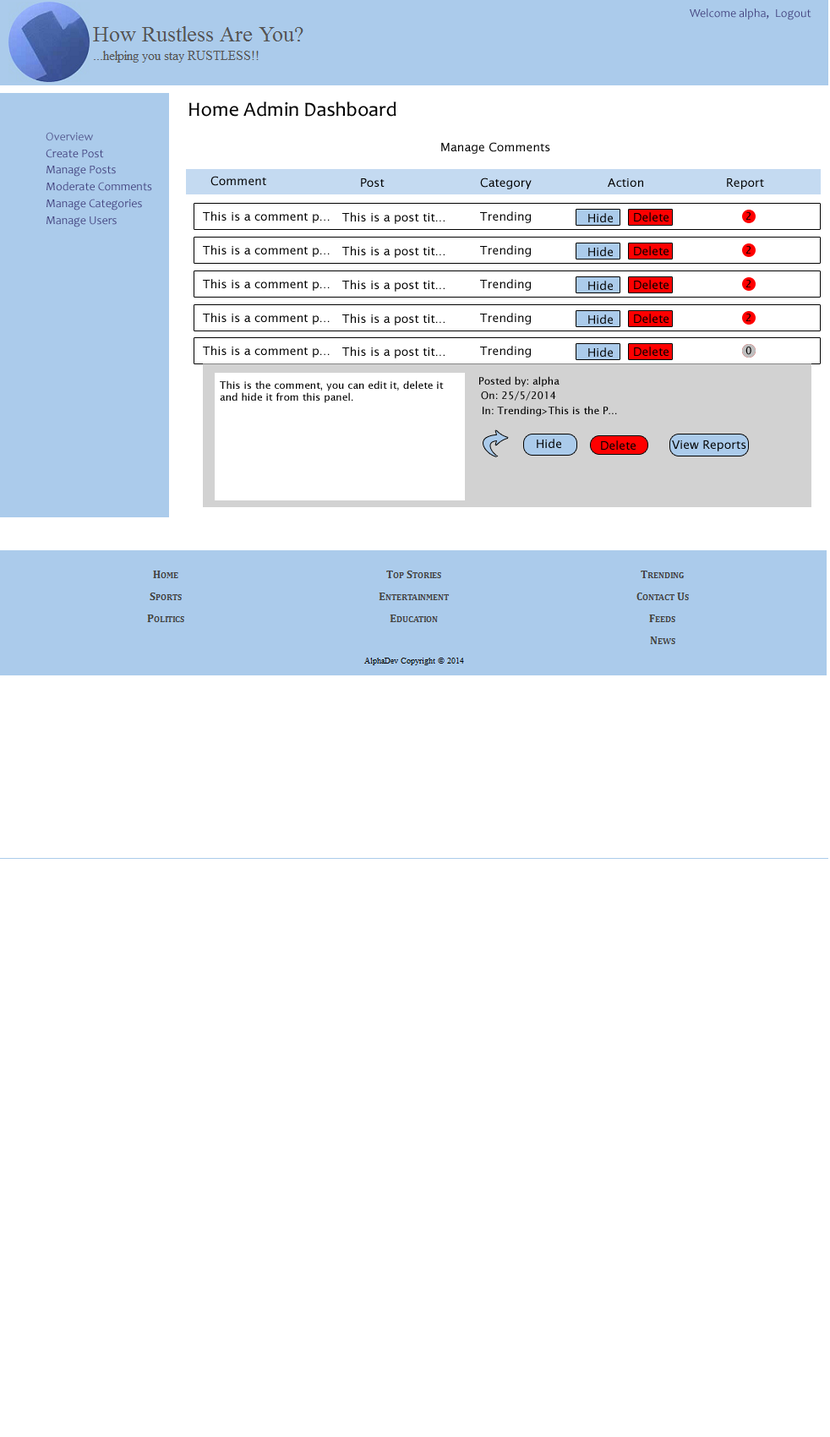
<style>
.page{position:relative;width:830px;height:1437px;background:#ffffff}
.page>*{position:absolute;margin:0}
.t1{font:11.8px "Candara";color:#444480}
.t2{font:20.3px "Candara";color:#000000}
.t3{font:11.8px "Candara";color:#565c91}
.t4{font:11.8px "LucidaSans";color:#000000}
.t5{font:10.1px "LucidaSans";color:#000000}
</style>
<div class="page">
<p class="t1" style="left:690px;top:8px;width:79px;height:11px">Welcome alpha,</p>
<p class="t1" style="left:776px;top:9px;width:35px;height:11px">Logout</p>
<p class="t2" style="left:189px;top:101px;width:207px;height:16px">Home Admin Dashboard</p>
<p class="t3" style="left:46px;top:132px;width:47px;height:9px">Overview</p>
<p class="t1" style="left:46px;top:149px;width:58px;height:9px">Create Post</p>
<p class="t4" style="left:441px;top:142px;width:109px;height:12px">Manage Comments</p>
<p class="t1" style="left:46px;top:166px;width:70px;height:11px">Manage Posts</p>
<p class="t1" style="left:46px;top:182px;width:106px;height:9px">Moderate Comments</p>
<p class="t4" style="left:210px;top:176px;width:56px;height:10px">Comment</p>
<p class="t4" style="left:361px;top:178px;width:24px;height:9px">Post</p>
<p class="t4" style="left:480px;top:177px;width:52px;height:12px">Category</p>
<p class="t4" style="left:608px;top:178px;width:35px;height:9px">Action</p>
<p class="t4" style="left:727px;top:178px;width:37px;height:11px">Report</p>
<p class="t1" style="left:46px;top:199px;width:96px;height:11px">Manage Categories</p>
<p class="t1" style="left:46px;top:216px;width:71px;height:11px">Manage Users</p>
<p class="t4" style="left:203px;top:346px;width:127px;height:12px">This is a comment p...</p>
<p class="t4" style="left:342px;top:347px;width:103px;height:11px">This is a post tit...</p>
<p class="t4" style="left:480px;top:346px;width:51px;height:12px">Trending</p>
<p class="t4" style="left:588px;top:347px;width:25px;height:10px">Hide</p>
<p class="t4" style="left:634px;top:347px;width:35px;height:9px">Delete</p>
<p class="t5" style="left:745px;top:347px;width:6px;height:8px">0</p>
<p class="t5" style="left:479px;top:376px;width:80px;height:11px">Posted by: alpha</p>
<p class="t5" style="left:220px;top:380px;width:224px;height:23px">This is the comment, you can edit it, delete it <br>and hide it from this panel.</p>
<p class="t5" style="left:481px;top:390px;width:75px;height:11px">On: 25/5/2014</p>
<p class="t5" style="left:483px;top:406px;width:134px;height:11px">In: Trending&gt;This is the P...</p>
<p class="t4" style="left:537px;top:439px;width:24px;height:9px">Hide</p>
<p class="t4" style="left:601px;top:440px;width:35px;height:10px">Delete</p>
<p class="t4" style="left:672px;top:440px;width:74px;height:11px">View Reports</p>
</div>
